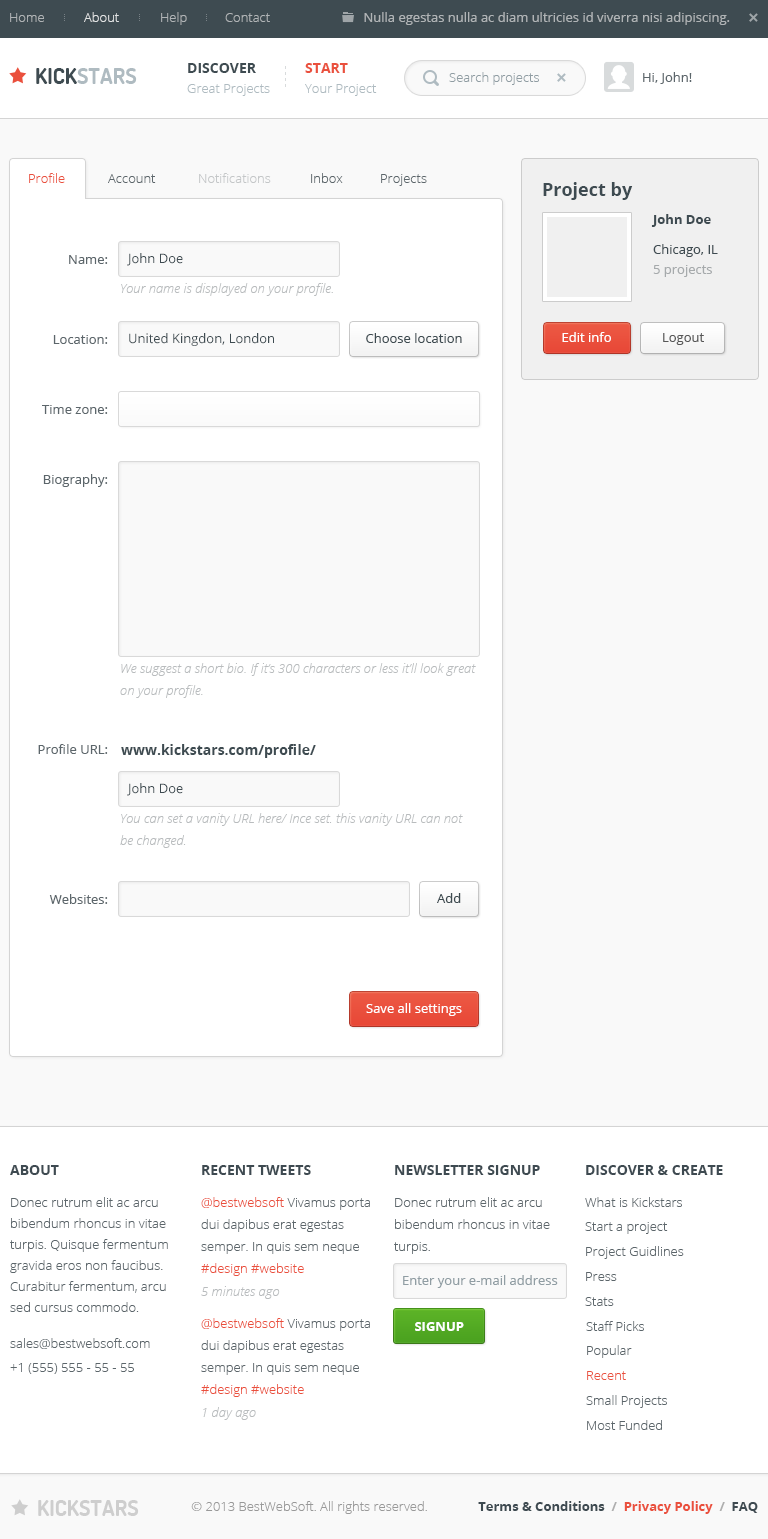
<style>
.page{position:relative;width:768px;height:1539px;background:#ffffff}
.page>*{position:absolute;margin:0}
.t1{font:13px "OpenSans-Light";color:#b0b4b6}
.t2{font:13px "OpenSans-Light";color:#e1e3e3}
.t3{font:13px "OpenSans";color:#b0b4b6}
.t4{font:14px "OpenSans-Bold";color:#3e4b51;text-transform:uppercase}
.t5{font:14px "OpenSans-Bold";color:#ea503d;text-transform:uppercase}
.t6{font:22px "Dosis-Bold";color:#afbbc1;text-transform:uppercase}
.t7{font:22px "Dosis-Bold";color:#3e4b51;text-transform:uppercase}
.t8{font:13px "OpenSans-Light";color:#909da3}
.t9{font:13px "OpenSans";color:#5c666b}
.t10{font:13px "OpenSans-Light";color:#afbbc1}
.t11{font:13px "OpenSans-Light";color:#ea503d}
.t12{font:13px "OpenSans-Light";color:#5c666b}
.t13{font:13px "OpenSans-Light";color:#c4c7c8}
.t14{font:18px "OpenSans-Bold";color:#3e4b51}
.t15{font:13px "OpenSans-Bold";color:#3e4b51}
.t16{font:13px "OpenSans";color:#3e4b51}
.t17{font:13px "OpenSans";color:#a6aaac}
.t18{font:13px "OpenSansLight-Italic";color:#b9bcbe}
.t19{font:13px "OpenSans";color:#ffffff}
.t20{font:13px "OpenSans";color:#575757}
.t21{font:13px/22px "OpenSansLight-Italic";color:#b9bcbe}
.t22{font:14px "OpenSans-Bold";color:#3e4b51}
.t23{font:14px "OpenSans-Bold";color:#3e4a51;text-transform:uppercase}
.t24{font:13px/21px "OpenSans-Light";color:#5c666b}
.t25{font:13px/22px "OpenSans-Light";color:#5c666b}
.t26{font:13px/22px "OpenSans-Light";color:#ea503d}
.t27{font:13px "OpenSans";color:#909da3}
.t28{font:13px "OpenSans-Bold";color:#ffffff;text-transform:uppercase}
.t29{font:22px "Dosis-Bold";color:#cecece;text-transform:uppercase}
.t30{font:13px "OpenSans-Light";color:#999999}
.t31{font:13px "OpenSans-Bold";color:#3e4a51}
.t32{font:13px "OpenSans-Bold";color:#aeaeae}
.t33{font:13px "OpenSans-Bold";color:#ea503d}
</style>
<div class="page">
<p class="t1" style="left:10px;top:13px;width:34px;height:9px">Home</p>
<p class="t2" style="left:84px;top:12px;width:35px;height:10px">About</p>
<p class="t1" style="left:161px;top:12px;width:26px;height:13px">Help</p>
<p class="t1" style="left:225px;top:13px;width:45px;height:9px">Contact</p>
<p class="t3" style="left:364px;top:12px;width:366px;height:13px">Nulla egestas nulla ac diam ultricies id viverra nisi adipiscing.</p>
<p class="t4" style="left:188px;top:63px;width:68px;height:10px">Discover</p>
<p class="t5" style="left:305px;top:63px;width:43px;height:10px">Start</p>
<p class="t6" style="left:36px;top:68px;width:101px;height:16px"><span class="t7">Kick</span>stars</p>
<p class="t8" style="left:449px;top:72px;width:90px;height:13px">Search projects</p>
<p class="t9" style="left:643px;top:72px;width:49px;height:12px">Hi, John!</p>
<p class="t10" style="left:187px;top:84px;width:83px;height:12px">Great Projects</p>
<p class="t10" style="left:305px;top:84px;width:72px;height:12px">Your Project</p>
<p class="t11" style="left:29px;top:173px;width:36px;height:10px">Profile</p>
<p class="t12" style="left:108px;top:174px;width:48px;height:9px">Account</p>
<p class="t13" style="left:199px;top:173px;width:72px;height:10px">Notifications</p>
<p class="t12" style="left:311px;top:173px;width:32px;height:10px">Inbox</p>
<p class="t12" style="left:381px;top:174px;width:46px;height:12px">Projects</p>
<p class="t14" style="left:543px;top:182px;width:90px;height:18px">Project by</p>
<p class="t15" style="left:651px;top:214px;width:60px;height:13px">John Doe</p>
<p class="t16" style="left:653px;top:244px;width:65px;height:13px">Chicago, IL</p>
<p class="t9" style="left:69px;top:255px;width:39px;height:9px">Name:</p>
<p class="t16" style="left:127px;top:253px;width:56px;height:13px">John Doe</p>
<p class="t17" style="left:653px;top:265px;width:59px;height:12px">5 projects</p>
<p class="t18" style="left:121px;top:283px;width:212px;height:13px">Your name is displayed on your profile.</p>
<p class="t9" style="left:53px;top:335px;width:55px;height:9px">Location:</p>
<p class="t16" style="left:129px;top:333px;width:145px;height:13px">United Kingdon, London</p>
<p class="t16" style="left:366px;top:333px;width:96px;height:10px">Choose location</p>
<p class="t19" style="left:562px;top:332px;width:49px;height:10px">Edit info</p>
<p class="t20" style="left:663px;top:333px;width:41px;height:12px">Logout</p>
<p class="t9" style="left:42px;top:405px;width:66px;height:9px">Time zone:</p>
<p class="t9" style="left:43px;top:474px;width:65px;height:13px">Biography:</p>
<p class="t21" style="left:120px;top:663px;width:356px;height:35px">We suggest a short bio. If it’s 300 characters or less it’ll look great on your profile.</p>
<p class="t9" style="left:38px;top:744px;width:70px;height:10px">Profile URL:</p>
<p class="t22" style="left:121px;top:744px;width:195px;height:14px">www.kickstars.com/profile/</p>
<p class="t16" style="left:127px;top:783px;width:56px;height:13px">John Doe</p>
<p class="t21" style="left:120px;top:813px;width:343px;height:35px">You can set a vanity URL here/ Ince set. this vanity URL can not be changed.</p>
<p class="t9" style="left:49px;top:894px;width:59px;height:10px">Websites:</p>
<p class="t16" style="left:437px;top:893px;width:24px;height:10px">Add</p>
<p class="t19" style="left:366px;top:1003px;width:96px;height:13px">Save all settings</p>
<p class="t23" style="left:10px;top:1165px;width:49px;height:10px">About</p>
<p class="t23" style="left:202px;top:1165px;width:109px;height:10px">Recent Tweets</p>
<p class="t23" style="left:395px;top:1165px;width:145px;height:10px">Newsletter Signup</p>
<p class="t23" style="left:586px;top:1165px;width:137px;height:10px">Discover &amp; Create</p>
<p class="t24" style="left:10px;top:1197px;width:158px;height:115px">Donec rutrum elit ac arcu bibendum rhoncus in vitae turpis. Quisque fermentum gravida eros non faucibus. Curabitur fermentum, arcu sed cursus commodo.</p>
<p class="t25" style="left:201px;top:1197px;width:169px;height:79px"><span class="t26">@bestwebsoft</span> Vivamus porta dui dapibus erat egestas semper. In quis sem neque <span class="t26">#design #website</span></p>
<p class="t25" style="left:394px;top:1197px;width:156px;height:57px">Donec rutrum elit ac arcu bibendum rhoncus in vitae turpis.</p>
<p class="t12" style="left:585px;top:1197px;width:97px;height:10px">What is Kickstars</p>
<p class="t12" style="left:585px;top:1222px;width:83px;height:12px">Start a project</p>
<p class="t12" style="left:586px;top:1246px;width:98px;height:13px">Project Guidlines</p>
<p class="t27" style="left:403px;top:1275px;width:155px;height:13px">Enter your e-mail address</p>
<p class="t12" style="left:586px;top:1272px;width:31px;height:9px">Press</p>
<p class="t18" style="left:201px;top:1286px;width:79px;height:13px">5 minutes ago</p>
<p class="t12" style="left:585px;top:1297px;width:29px;height:9px">Stats</p>
<p class="t25" style="left:201px;top:1318px;width:169px;height:79px"><span class="t26">@bestwebsoft</span> Vivamus porta dui dapibus erat egestas semper. In quis sem neque <span class="t26">#design #website</span></p>
<p class="t28" style="left:415px;top:1322px;width:49px;height:9px">Signup</p>
<p class="t12" style="left:586px;top:1321px;width:58px;height:10px">Staff Picks</p>
<p class="t12" style="left:10px;top:1338px;width:140px;height:11px">sales@bestwebsoft.com</p>
<p class="t12" style="left:587px;top:1345px;width:45px;height:13px">Popular</p>
<p class="t12" style="left:10px;top:1363px;width:124px;height:11px">+1 (555) 555 - 55 - 55</p>
<p class="t11" style="left:587px;top:1371px;width:39px;height:9px">Recent</p>
<p class="t12" style="left:586px;top:1395px;width:81px;height:13px">Small Projects</p>
<p class="t18" style="left:203px;top:1407px;width:53px;height:13px">1 day ago</p>
<p class="t12" style="left:587px;top:1420px;width:75px;height:10px">Most Funded</p>
<p class="t29" style="left:38px;top:1500px;width:101px;height:16px">Kickstars</p>
<p class="t30" style="left:191px;top:1501px;width:236px;height:13px">© 2013 BestWebSoft. All rights reserved.</p>
<p class="t31" style="left:478px;top:1501px;width:280px;height:13px">Terms &amp; Conditions <span class="t32"> /  </span><span class="t33">Privacy Policy  </span><span class="t32">/</span>  FAQ</p>
</div>
